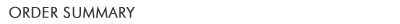
<style>
.page{position:relative;width:400px;height:24px;background:#ffffff}
.page>*{position:absolute;margin:0}
.t1{font:14.7px "FuturaBT-Light";letter-spacing:0.025em;color:#363636;text-transform:uppercase;font-weight:bold}
</style>
<div class="page">
<p class="t1" style="left:9px;top:6px;width:126px;height:12px">ORDER SUMMARY</p>
</div>
